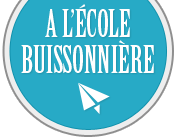
<style>
.page{position:relative;width:176px;height:139px;background:#27aac6}
.page>*{position:absolute;margin:0}
.t1{font:38px/36px "BirchStd";letter-spacing:-0.01em;color:#fffefe;text-transform:uppercase}
</style>
<div class="page">
<p class="t1" style="left:21px;top:4px;width:133px;height:69px;text-align:center">A l’école<br>buissonnière</p>
</div>
